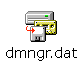
<style>
.page{position:relative;width:80px;height:80px;background:#ffffff}
.page>*{position:absolute;margin:0}
.t1{font:14px "MSReferenceSansSerif";color:#000000}
</style>
<div class="page">
<p class="t1" style="left:6px;top:47px;width:71px;height:14px">dmngr.dat</p>
</div>
